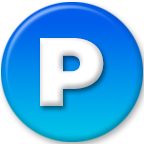
<style>
.page{position:relative;width:144px;height:144px;background:#ffffff}
.page>*{position:absolute;margin:0}
.t1{font:97.4px "Montserrat-Black";color:#ffffff}
</style>
<div class="page">
<p class="t1" style="left:40px;top:38px;width:64px;height:68px">P</p>
</div>
